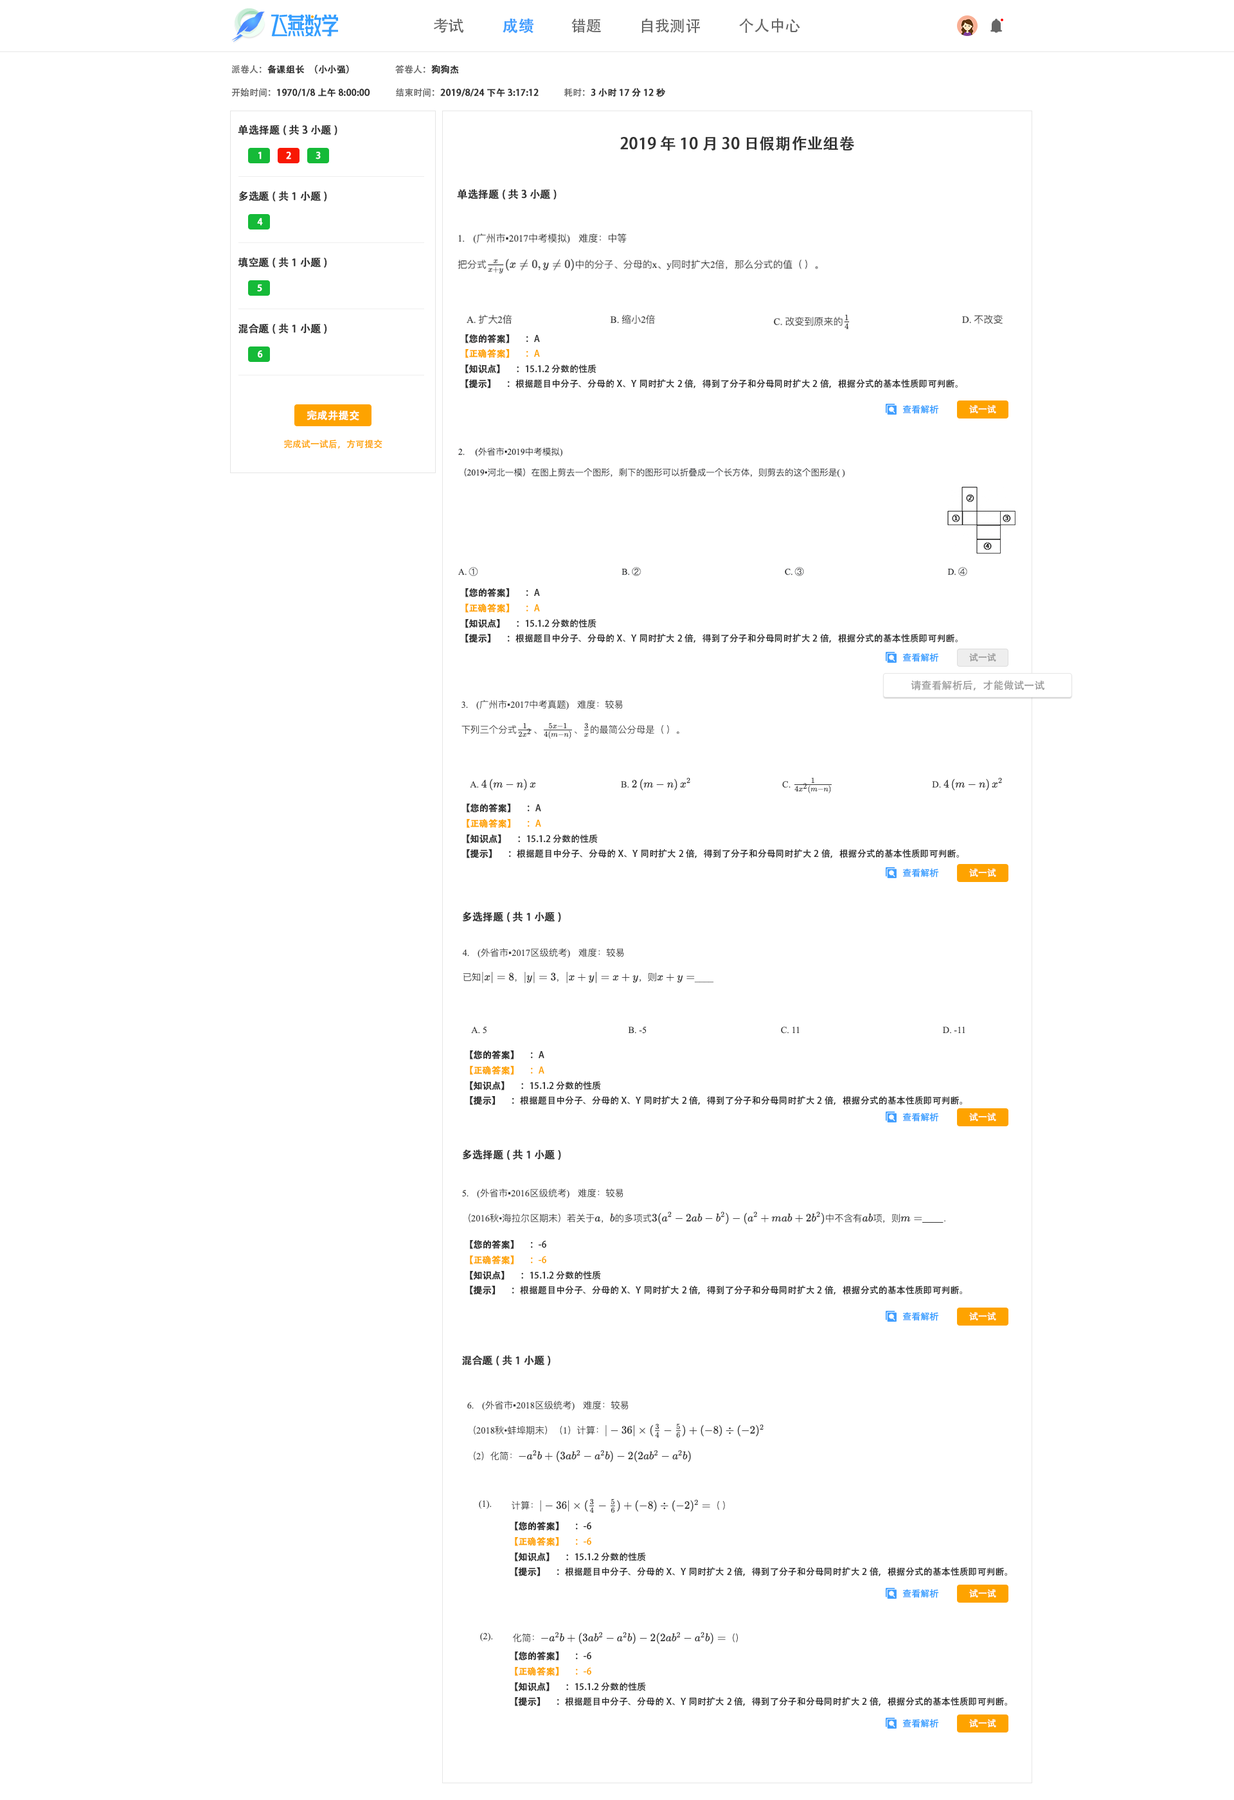
<style>
.page{position:relative;width:1234px;height:1800px;background:#ffffff}
.page>*{position:absolute;margin:0}
.t1{font:15.4px "AdobeHeitiStd-Regular";color:#666666}
.t2{font:15.4px "AdobeHeitiStd-Regular";color:#409eff;font-weight:bold}
.t3{font:9px "AdobeHeitiStd-Regular";color:#333333;font-weight:bold}
.t4{font:9px "AdobeHeitiStd-Regular";color:#666666}
.t5{font:10.3px "AdobeHeitiStd-Regular";color:#333333;font-weight:bold}
.t6{font:15.4px "AdobeHeitiStd-Regular";color:#333333;font-weight:bold}
.t7{font:9px "AdobeHeitiStd-Regular";color:#ffffff;font-weight:bold}
.t8{font:9px "AdobeHeitiStd-Regular";color:#333333}
.t9{font:9px "AdobeHeitiStd-Regular";color:#fea300;font-weight:bold}
.t10{font:9px "AdobeHeitiStd-Regular";color:#fea300}
.t11{font:9px "AdobeHeitiStd-Regular";color:#2e2e2e}
.t12{font:9px "AdobeHeitiStd-Regular";color:#2e2e2e;font-weight:bold}
.t13{font:10.3px "AdobeHeitiStd-Regular";color:#ffffff;font-weight:bold}
.t14{font:9px "AdobeHeitiStd-Regular";color:#339dff}
.t15{font:9px "AdobeHeitiStd-Regular";color:#ffffff}
.t16{font:9px "AdobeHeitiStd-Regular";color:#999999}
.t17{font:10.3px "AdobeHeitiStd-Regular";color:#999999}
</style>
<div class="page">
<p class="t1" style="left:433px;top:18px;width:31px;height:15px">考试</p>
<p class="t2" style="left:503px;top:18px;width:31px;height:15px">成绩</p>
<p class="t1" style="left:572px;top:19px;width:29px;height:14px">错题</p>
<p class="t1" style="left:642px;top:18px;width:58px;height:15px">自我测评</p>
<p class="t1" style="left:739px;top:18px;width:61px;height:15px">个人中心</p>
<p class="t3" style="left:231px;top:65px;width:118px;height:9px"><span class="t4">派卷人：</span>备课组长（小小强）</p>
<p class="t4" style="left:395px;top:64px;width:64px;height:10px">答卷人：<span class="t3">狗狗杰</span></p>
<p class="t3" style="left:231px;top:88px;width:139px;height:9px"><span class="t4">开始时间：</span>1970/1/8 上午8:00:00</p>
<p class="t3" style="left:396px;top:88px;width:143px;height:9px"><span class="t4">结束时间：</span>2019/8/24 下午3:17:12</p>
<p class="t3" style="left:564px;top:88px;width:101px;height:9px"><span class="t4">耗时：</span>3小时17分12秒</p>
<p class="t5" style="left:238px;top:125px;width:100px;height:11px">单选择题(共3小题)</p>
<p class="t6" style="left:620px;top:136px;width:234px;height:15px">2019年10月30日假期作业组卷</p>
<p class="t7" style="left:258px;top:152px;width:4px;height:7px">1</p>
<p class="t7" style="left:286px;top:152px;width:5px;height:7px">2</p>
<p class="t7" style="left:316px;top:152px;width:5px;height:7px">3</p>
<p class="t5" style="left:239px;top:191px;width:88px;height:11px">多选题(共1小题)</p>
<p class="t5" style="left:457px;top:189px;width:100px;height:11px">单选择题(共3小题)</p>
<p class="t7" style="left:257px;top:218px;width:6px;height:8px">4</p>
<p class="t5" style="left:238px;top:257px;width:89px;height:11px">填空题(共1小题)</p>
<p class="t7" style="left:257px;top:284px;width:5px;height:8px">5</p>
<p class="t5" style="left:239px;top:323px;width:88px;height:11px">混合题(共1小题)</p>
<p class="t3" style="left:465px;top:334px;width:75px;height:9px">【您的答案】 <span class="t8">     ：A</span></p>
<p class="t7" style="left:258px;top:350px;width:5px;height:8px">6</p>
<p class="t9" style="left:465px;top:349px;width:75px;height:9px">【正确答案】 <span class="t10">     ：A</span></p>
<p class="t11" style="left:465px;top:364px;width:132px;height:10px"><span class="t12">【知识点】 </span>     ：15.1.2 分数的性质</p>
<p class="t11" style="left:465px;top:379px;width:493px;height:9px"><span class="t12">【提示】 </span>     ：根据题目中分子、分母的X、Y同时扩大2倍，得到了分子和分母同时扩大2倍，根据分式的基本性质即可判断。</p>
<p class="t13" style="left:307px;top:410px;width:52px;height:10px">完成并提交</p>
<p class="t14" style="left:903px;top:405px;width:36px;height:9px">查看解析</p>
<p class="t15" style="left:969px;top:405px;width:27px;height:8px">试一试</p>
<p class="t10" style="left:284px;top:439px;width:98px;height:10px">完成试一试后，方可提交</p>
<p class="t3" style="left:465px;top:588px;width:75px;height:9px">【您的答案】 <span class="t8">     ：A</span></p>
<p class="t9" style="left:465px;top:604px;width:75px;height:9px">【正确答案】 <span class="t10">     ：A</span></p>
<p class="t11" style="left:465px;top:619px;width:132px;height:9px"><span class="t12">【知识点】 </span>     ：15.1.2 分数的性质</p>
<p class="t11" style="left:465px;top:633px;width:493px;height:10px"><span class="t12">【提示】 </span>     ：根据题目中分子、分母的X、Y同时扩大2倍，得到了分子和分母同时扩大2倍，根据分式的基本性质即可判断。</p>
<p class="t14" style="left:903px;top:653px;width:36px;height:9px">查看解析</p>
<p class="t16" style="left:969px;top:653px;width:27px;height:9px">试一试</p>
<p class="t17" style="left:911px;top:680px;width:134px;height:10px">请查看解析后，才能做试一试</p>
<p class="t3" style="left:467px;top:804px;width:74px;height:9px">【您的答案】 <span class="t8">     ：A</span></p>
<p class="t9" style="left:467px;top:819px;width:74px;height:9px">【正确答案】 <span class="t10">     ：A</span></p>
<p class="t11" style="left:467px;top:834px;width:131px;height:9px"><span class="t12">【知识点】 </span>     ：15.1.2 分数的性质</p>
<p class="t11" style="left:467px;top:849px;width:492px;height:9px"><span class="t12">【提示】 </span>     ：根据题目中分子、分母的X、Y同时扩大2倍，得到了分子和分母同时扩大2倍，根据分式的基本性质即可判断。</p>
<p class="t14" style="left:903px;top:869px;width:36px;height:9px">查看解析</p>
<p class="t15" style="left:969px;top:869px;width:27px;height:8px">试一试</p>
<p class="t5" style="left:462px;top:912px;width:99px;height:11px">多选择题(共1小题)</p>
<p class="t12" style="left:470px;top:1050px;width:74px;height:9px">【您的答案】 <span class="t11">     ：A</span></p>
<p class="t9" style="left:470px;top:1066px;width:74px;height:9px">【正确答案】 <span class="t10">     ：A</span></p>
<p class="t11" style="left:470px;top:1081px;width:131px;height:9px"><span class="t12">【知识点】 </span>     ：15.1.2 分数的性质</p>
<p class="t11" style="left:470px;top:1095px;width:492px;height:10px"><span class="t12">【提示】 </span>     ：根据题目中分子、分母的X、Y同时扩大2倍，得到了分子和分母同时扩大2倍，根据分式的基本性质即可判断。</p>
<p class="t14" style="left:903px;top:1113px;width:36px;height:9px">查看解析</p>
<p class="t15" style="left:969px;top:1113px;width:27px;height:8px">试一试</p>
<p class="t5" style="left:462px;top:1149px;width:99px;height:11px">多选择题(共1小题)</p>
<p class="t3" style="left:470px;top:1240px;width:76px;height:9px">【您的答案】 <span class="t8">     ：-6</span></p>
<p class="t9" style="left:470px;top:1256px;width:76px;height:8px">【正确答案】 <span class="t10">     ：-6</span></p>
<p class="t11" style="left:470px;top:1271px;width:131px;height:9px"><span class="t12">【知识点】 </span>     ：15.1.2 分数的性质</p>
<p class="t11" style="left:470px;top:1285px;width:492px;height:10px"><span class="t12">【提示】 </span>     ：根据题目中分子、分母的X、Y同时扩大2倍，得到了分子和分母同时扩大2倍，根据分式的基本性质即可判断。</p>
<p class="t14" style="left:903px;top:1312px;width:36px;height:9px">查看解析</p>
<p class="t15" style="left:969px;top:1312px;width:27px;height:8px">试一试</p>
<p class="t5" style="left:462px;top:1355px;width:89px;height:11px">混合题(共1小题)</p>
<p class="t12" style="left:515px;top:1522px;width:76px;height:9px">【您的答案】 <span class="t11">     ：-6</span></p>
<p class="t9" style="left:515px;top:1537px;width:76px;height:9px">【正确答案】 <span class="t10">     ：-6</span></p>
<p class="t11" style="left:515px;top:1553px;width:131px;height:9px"><span class="t12">【知识点】 </span>     ：15.1.2 分数的性质</p>
<p class="t11" style="left:515px;top:1567px;width:492px;height:9px"><span class="t12">【提示】 </span>     ：根据题目中分子、分母的X、Y同时扩大2倍，得到了分子和分母同时扩大2倍，根据分式的基本性质即可判断。</p>
<p class="t14" style="left:903px;top:1589px;width:36px;height:9px">查看解析</p>
<p class="t15" style="left:969px;top:1589px;width:27px;height:9px">试一试</p>
<p class="t3" style="left:515px;top:1652px;width:76px;height:9px">【您的答案】 <span class="t8">     ：-6</span></p>
<p class="t9" style="left:515px;top:1667px;width:76px;height:9px">【正确答案】 <span class="t10">     ：-6</span></p>
<p class="t11" style="left:515px;top:1682px;width:131px;height:9px"><span class="t12">【知识点】 </span>     ：15.1.2 分数的性质</p>
<p class="t11" style="left:515px;top:1697px;width:492px;height:9px"><span class="t12">【提示】 </span>     ：根据题目中分子、分母的X、Y同时扩大2倍，得到了分子和分母同时扩大2倍，根据分式的基本性质即可判断。</p>
<p class="t14" style="left:903px;top:1719px;width:36px;height:9px">查看解析</p>
<p class="t15" style="left:969px;top:1719px;width:27px;height:8px">试一试</p>
</div>
